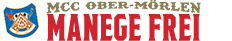
<style>
.page{position:relative;width:232px;height:41px;background:#ffffff}
.page>*{position:absolute;margin:0}
.t1{font:14.2px "TexasTangoBOLDPERSONALUSE";letter-spacing:0.025em;color:#887e54;text-transform:uppercase}
.t2{font:35px "FieldsofCathay-Regular";letter-spacing:0.01em;color:#cf242d;text-transform:uppercase}
</style>
<div class="page">
<p class="t1" style="left:46px;top:0px;width:155px;height:14px">MCC Ober-Mörlen</p>
<p class="t2" style="left:47px;top:14px;width:153px;height:27px">MANEGE FREI</p>
</div>
